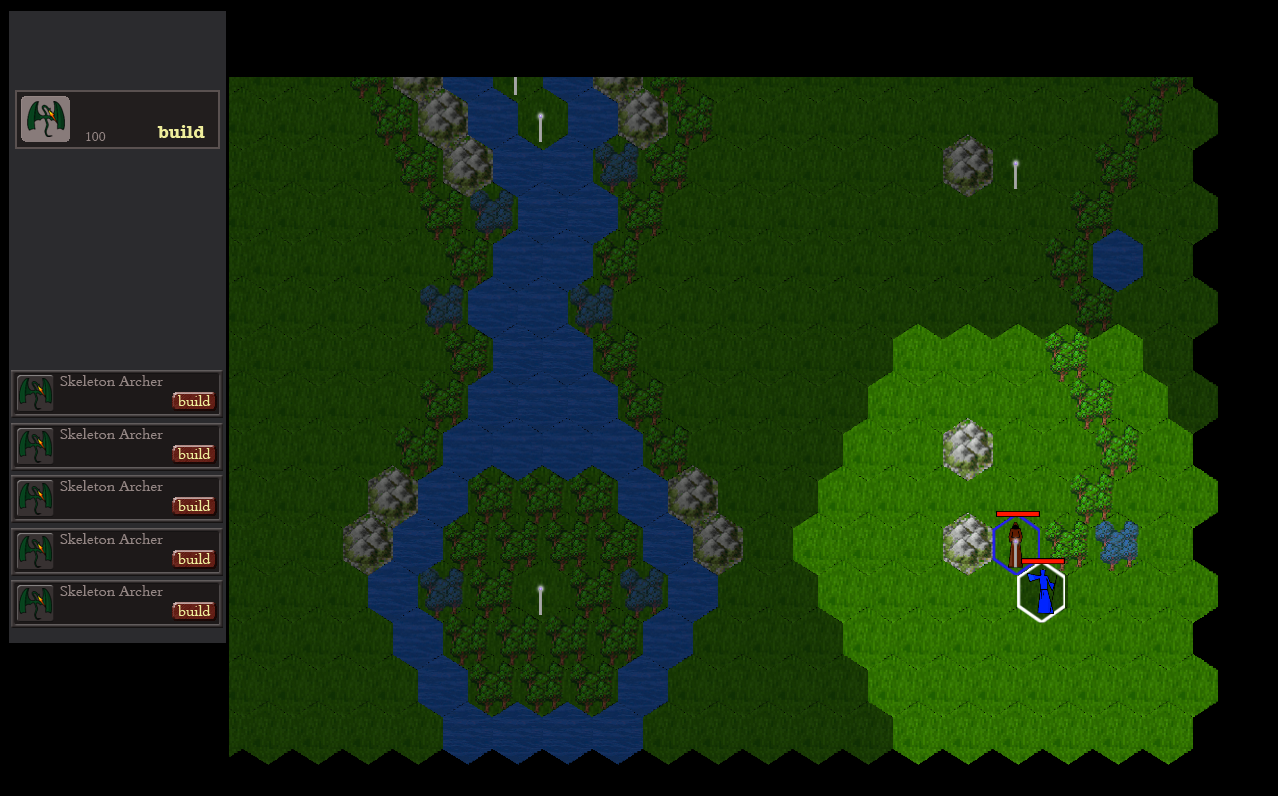
<style>
.page{position:relative;width:1278px;height:796px;background:#000000}
.page>*{position:absolute;margin:0}
.t1{font:14px "TraditionalArabic";color:#948684}
.t2{font:16px "TraditionalArabic";color:#948684}
.t3{font:16px "TraditionalArabic";color:#eeed9b}
</style>
<div class="page">
<p class="t1" style="left:86px;top:132px;width:20px;height:9px">100</p>
<p class="t2" style="left:60px;top:375px;width:103px;height:11px">Skeleton Archer</p>
<p class="t3" style="left:178px;top:395px;width:33px;height:11px">build</p>
</div>
